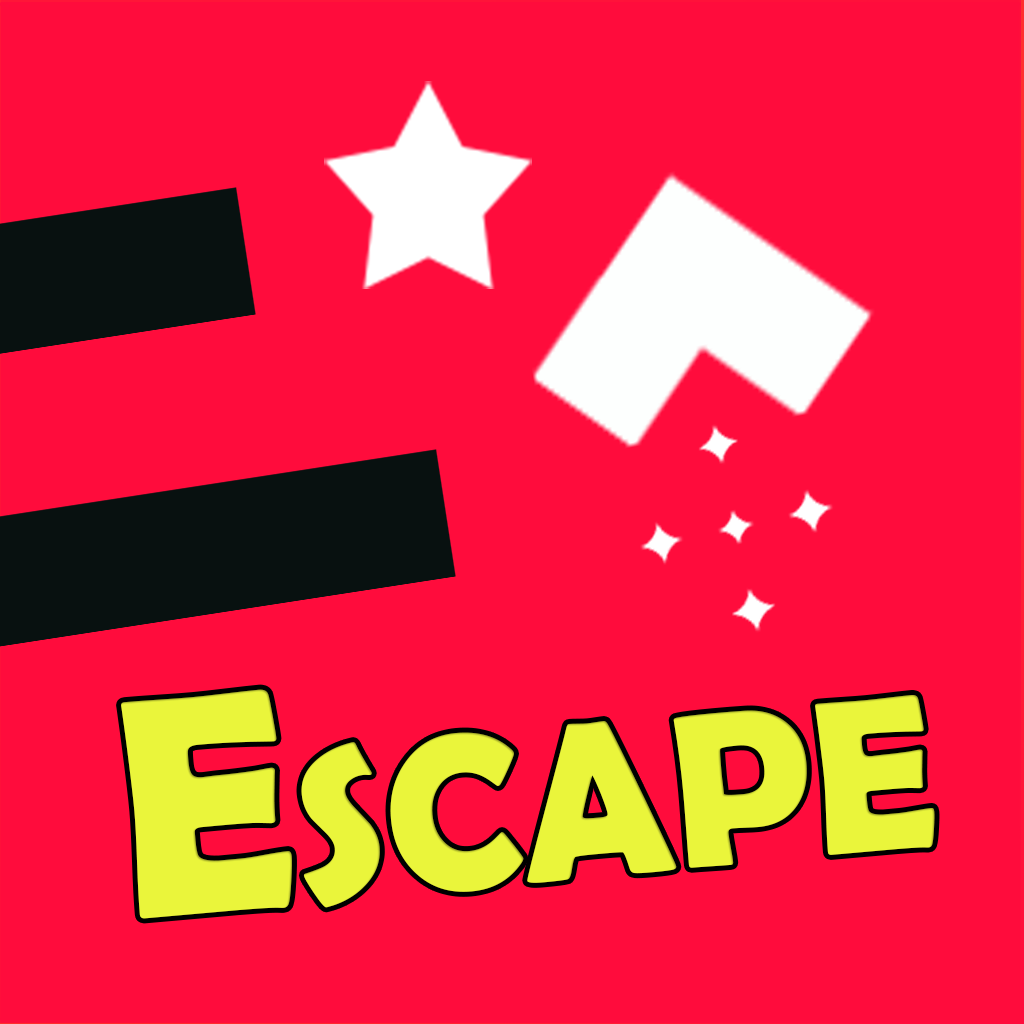
<style>
.page{position:relative;width:1024px;height:1024px;background:#ff0c3c}
.page>*{position:absolute;margin:0}
.t1{font:316.7px "BerlinSansFBDemi-Bold";color:#eaf53b;font-variant:small-caps}
</style>
<div class="page">
<p class="t1" style="left:121px;top:689px;width:814px;height:230px;rotate:-5deg">Escape</p>
</div>
